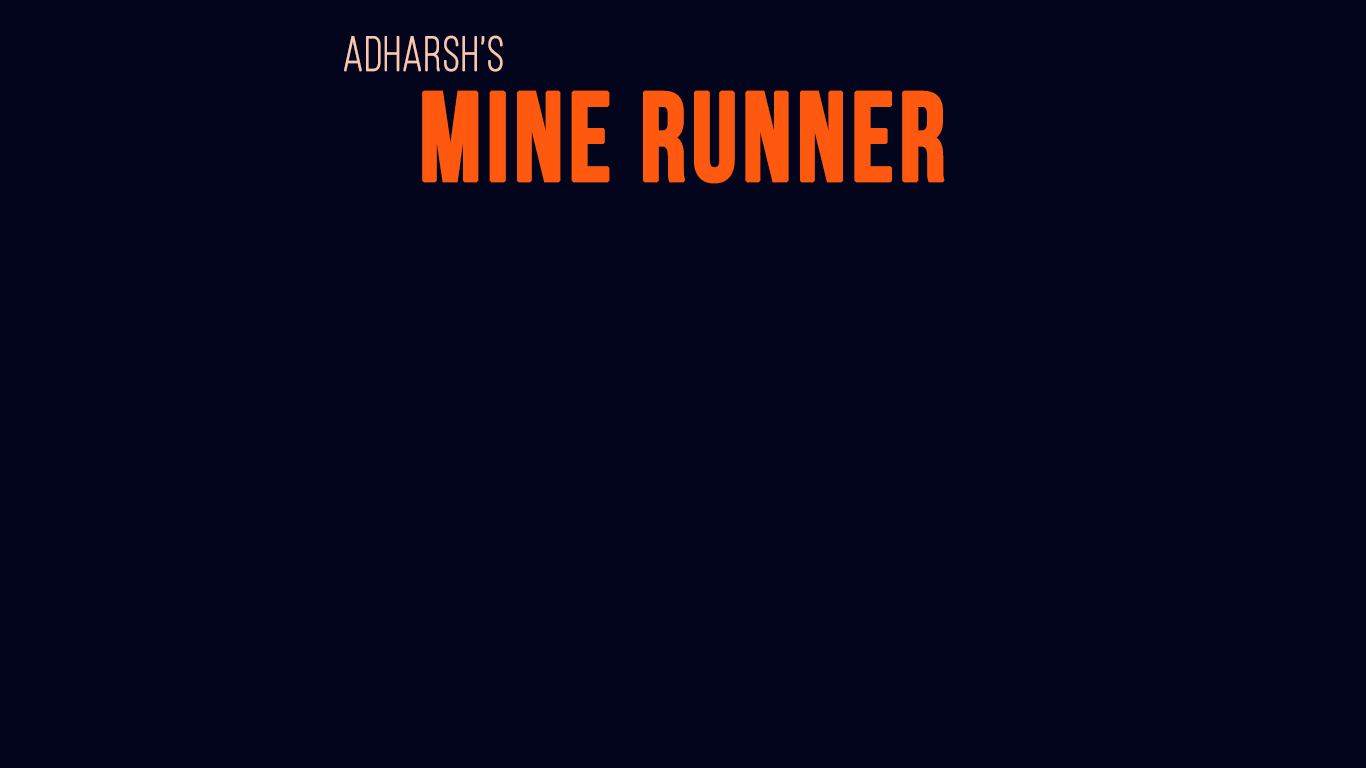
<style>
.page{position:relative;width:1366px;height:768px;background:#03051d}
.page>*{position:absolute;margin:0}
.t1{font:48.3px "BebasNeueLight";letter-spacing:0.025em;color:#f9c7b1;font-weight:bold;scale:0.9 1}
.t2{font:125.6px "BebasNeueBold";letter-spacing:0.025em;color:#ff5910;font-weight:bold;scale:0.9 1}
</style>
<div class="page">
<p class="t1" style="left:344px;top:35px;width:159px;height:37px">Adharsh’s</p>
<p class="t2" style="left:422px;top:90px;width:523px;height:94px">MINE RUNNER</p>
</div>
